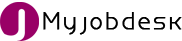
<style>
.page{position:relative;width:182px;height:41px;background:#ffffff}
.page>*{position:absolute;margin:0}
.t1{font:24px "KolnMesseDeutz";letter-spacing:0.14em;color:#000000;font-weight:bold}
</style>
<div class="page">
<p class="t1" style="left:43px;top:12px;width:139px;height:23px">Myjobdesk</p>
</div>
